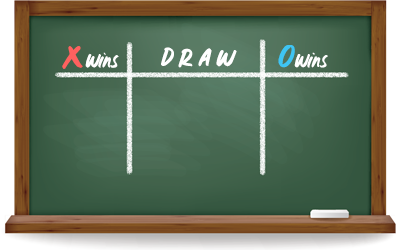
<style>
.page{position:relative;width:400px;height:250px}
.page>*{position:absolute;margin:0}
.t1{font:20.2px "WillowWispRegular";color:#ffffff;font-weight:bold;scale:1.07 1}
.t2{font:32.9px "WillowWispRegular";color:#ff615f;font-weight:bold;scale:1.07 1}
.t3{font:24.2px "WillowWispRegular";letter-spacing:0.2em;color:#ffffff;font-weight:bold;scale:1.18 1}
.t4{font:32.9px "WillowWispRegular";color:#3ec5f3;font-weight:bold;scale:1.07 1}
</style>
<div class="page">
<p class="t1" style="left:62px;top:46px;width:57px;height:23px"><span class="t2">X</span>Wins</p>
<p class="t3" style="left:161px;top:47px;width:76px;height:21px">DRAW</p>
<p class="t1" style="left:278px;top:45px;width:50px;height:23px"><span class="t4">O</span>Wins</p>
</div>
